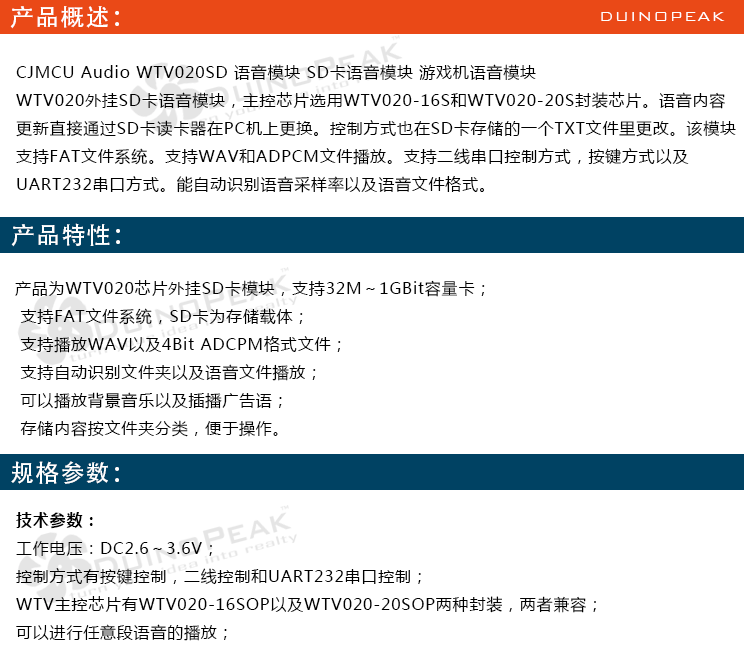
<style>
.page{position:relative;width:744px;height:653px;background:#ffffff}
.page>*{position:absolute;margin:0}
.t1{font:24px "AdobeHeitiStd-Regular";letter-spacing:0.05em;color:#ffffff}
.t2{font:18px "BankGothicBT-Light";letter-spacing:0.05em;color:#ffffff}
.t3{font:16px "MicrosoftYaHei";letter-spacing:0.05em;color:#000000}
.t4{font:16px "MicrosoftYaHei-Bold";letter-spacing:0.05em;color:#000000}
</style>
<div class="page">
<p class="t1" style="left:10px;top:6px;width:109px;height:23px">产品概述：</p>
<p class="t2" style="left:601px;top:12px;width:124px;height:9px">DUINOPEAK</p>
<p class="t3" style="left:16px;top:64px;width:720px;height:129px">CJMCU Audio WTV020SD 语音模块 SD卡语音模块 游戏机语音模块<br>WTV020外挂SD卡语音模块，主控芯片选用WTV020-16S和WTV020-20S封装芯片。语音内容<br>更新直接通过SD卡读卡器在PC机上更换。控制方式也在SD卡存储的一个TXT文件里更改。该模块<br>支持FAT文件系统。支持WAV和ADPCM文件播放。支持二线串口控制方式，按键方式以及<br>UART232串口方式。能自动识别语音采样率以及语音文件格式。</p>
<p class="t1" style="left:11px;top:223px;width:109px;height:24px">产品特性：</p>
<p class="t3" style="left:15px;top:280px;width:470px;height:157px">产品为WTV020芯片外挂SD卡模块，支持32M～1GBit容量卡；<br> 支持FAT文件系统，SD卡为存储载体；<br> 支持播放WAV以及4Bit ADCPM格式文件；<br> 支持自动识别文件夹以及语音文件播放；<br> 可以播放背景音乐以及插播广告语；<br> 存储内容按文件夹分类，便于操作。</p>
<p class="t1" style="left:11px;top:461px;width:108px;height:23px">规格参数：</p>
<p class="t3" style="left:16px;top:512px;width:580px;height:129px"><span class="t4">技术参数：</span><br>工作电压：DC2.6～3.6V；<br>控制方式有按键控制，二线控制和UART232串口控制；<br>WTV主控芯片有WTV020-16SOP以及WTV020-20SOP两种封装，两者兼容；<br>可以进行任意段语音的播放；</p>
</div>
